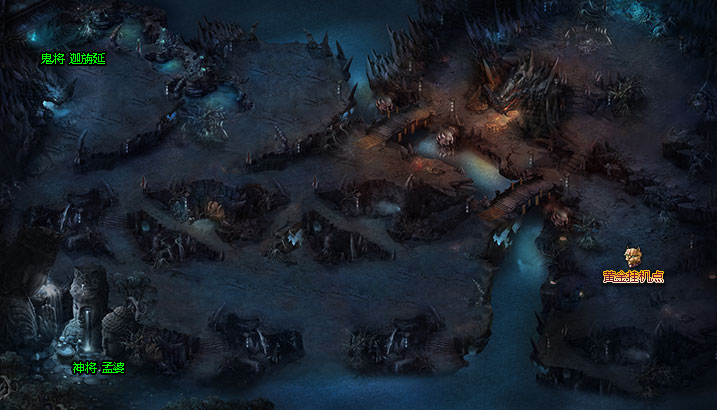
<style>
.page{position:relative;width:717px;height:410px}
.page>*{position:absolute;margin:0}
.t1{font:12px "MicrosoftYaHei";color:#00ff00}
.t2{font:12px "MicrosoftYaHei";color:#701633}
</style>
<div class="page">
<p class="t1" style="left:41px;top:53px;width:64px;height:11px">鬼将 迦旃延</p>
<p class="t2" style="left:604px;top:271px;width:59px;height:11px">黄金挂机点</p>
<p class="t1" style="left:73px;top:362px;width:51px;height:11px">神将 孟婆</p>
</div>
